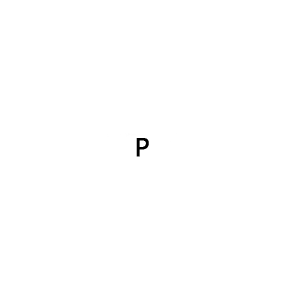
<style>
.page{position:relative;width:284px;height:284px;background:#ffffff}
.page>*{position:absolute;margin:0}
.t1{font:24px "Geneva";color:#000000;font-weight:bold}
</style>
<div class="page">
<p class="t1" style="left:136px;top:138px;width:13px;height:19px">P</p>
</div>
